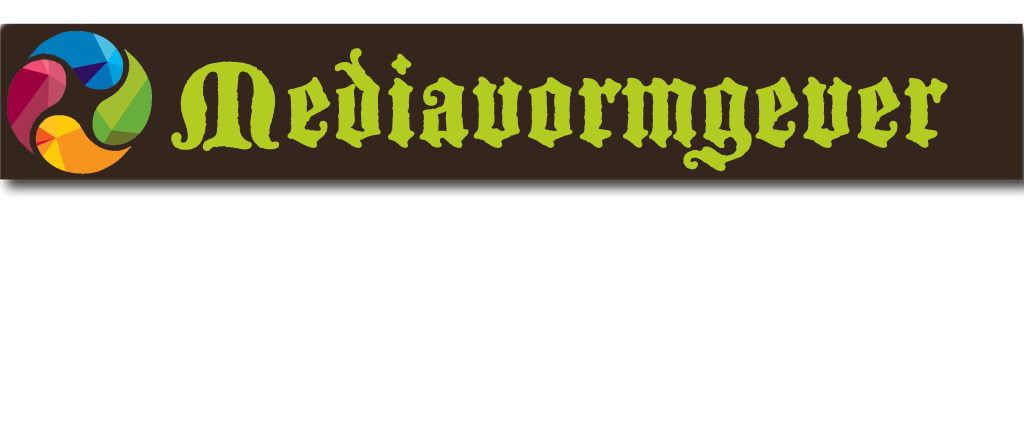
<style>
.page{position:relative;width:1024px;height:438px;background:#ffffff}
.page>*{position:absolute;margin:0}
.t1{font:130px "BlackmoorLetPlain";color:#b3cc22}
</style>
<div class="page">
<p class="t1" style="left:171px;top:48px;width:777px;height:124px">Mediavormgever</p>
</div>
